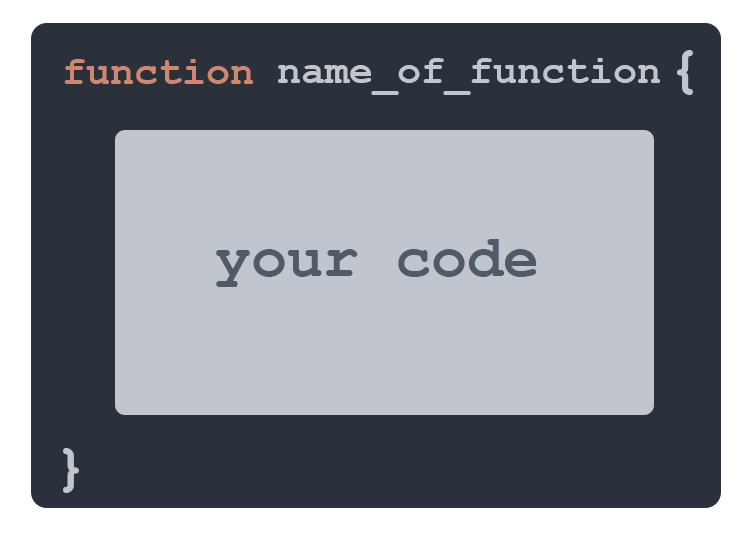
<style>
.page{position:relative;width:752px;height:540px;background:#2b313b}
.page>*{position:absolute;margin:0}
.t1{font:60px "CourierNewPS-BoldMT";color:#c0c5ce}
.t2{font:40px "CourierNewPS-BoldMT";color:#d08770}
.t3{font:40px "CourierNewPS-BoldMT";color:#c0c5ce}
.t4{font:60px "CourierNewPS-BoldMT";color:#4f5b66}
</style>
<div class="page">
<p class="t1" style="left:677px;top:50px;width:16px;height:45px">{</p>
<p class="t2" style="left:64px;top:59px;width:189px;height:25px">function</p>
<p class="t3" style="left:278px;top:58px;width:382px;height:37px">name_of_function</p>
<p class="t4" style="left:216px;top:239px;width:321px;height:48px">your code</p>
<p class="t1" style="left:63px;top:448px;width:16px;height:45px">}</p>
</div>
